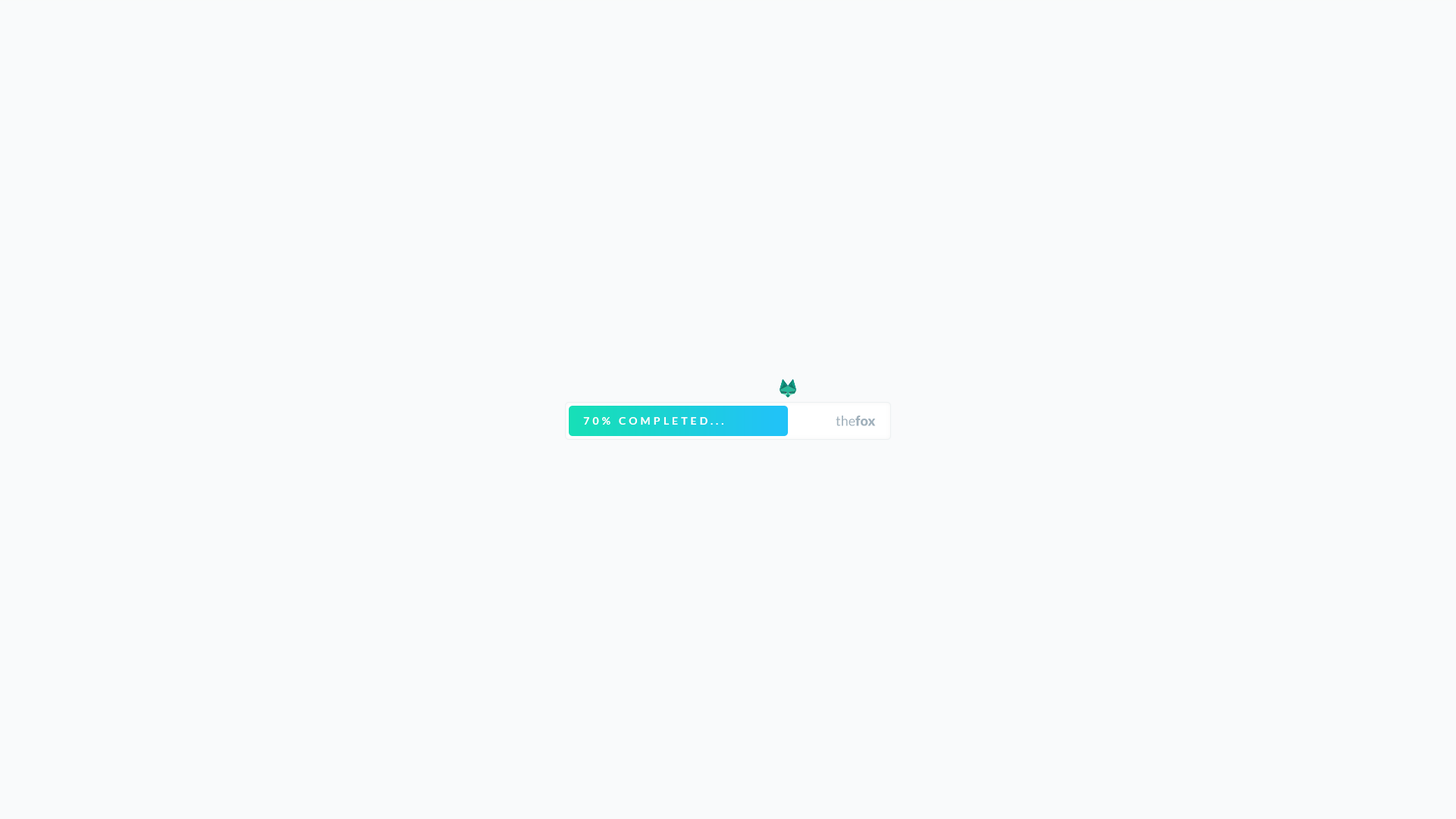
<style>
.page{position:relative;width:1456px;height:819px;background:#f9fafb}
.page>*{position:absolute;margin:0}
.t1{font:10.6px "Lato-Bold";letter-spacing:0.3em;color:#ffffff}
.t2{font:13.6px "Lato-Regular";color:#a1b1bc}
.t3{font:13.6px "Lato-Black";color:#a1b1bc}
</style>
<div class="page">
<p class="t1" style="left:583px;top:417px;width:140px;height:8px">70% COMPLETED...</p>
<p class="t2" style="left:836px;top:416px;width:40px;height:10px">the<span class="t3">fox</span></p>
</div>
